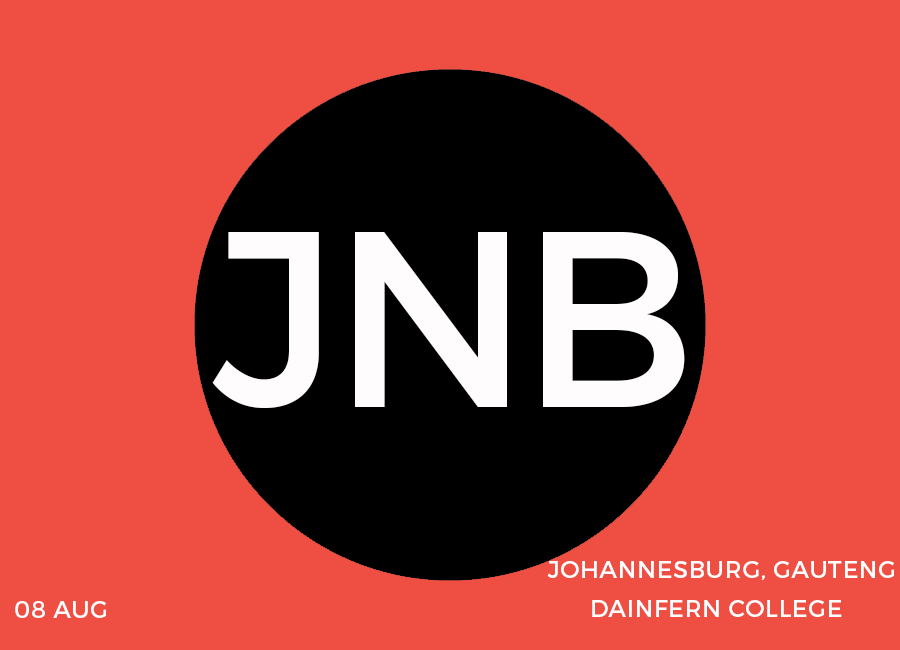
<style>
.page{position:relative;width:900px;height:650px;background:#ef4f42}
.page>*{position:absolute;margin:0}
.t1{font:24px "Montserrat-Regular";letter-spacing:0.02em;color:#ffffff}
</style>
<div class="page">
<p class="t1" style="left:547px;top:561px;width:347px;height:19px">JOHANNESBURG, GAUTENG</p>
<p class="t1" style="left:15px;top:601px;width:91px;height:17px">08 AUG</p>
<p class="t1" style="left:592px;top:600px;width:250px;height:17px">DAINFERN COLLEGE</p>
</div>
